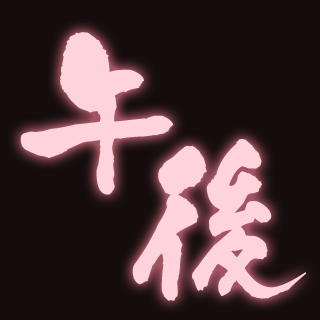
<style>
.page{position:relative;width:320px;height:320px;background:#150d0d}
.page>*{position:absolute;margin:0}
.t1{font:180px "KyoMadoka";color:#ffd3db;font-weight:bold}
</style>
<div class="page">
<p class="t1" style="left:20px;top:32px;width:154px;height:163px">午</p>
<p class="t1" style="left:132px;top:139px;width:175px;height:162px">後</p>
</div>
